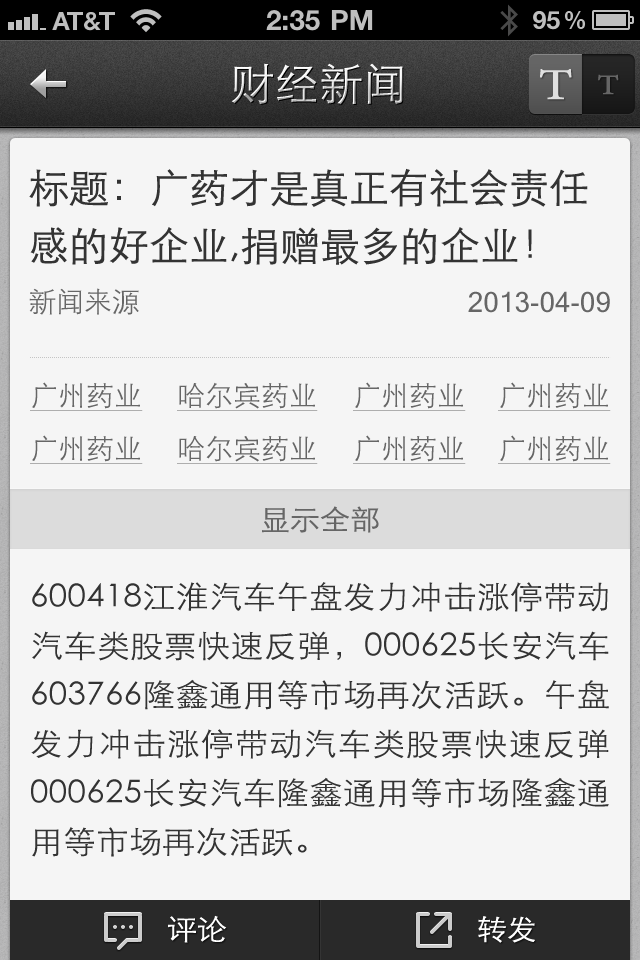
<style>
.page{position:relative;width:640px;height:960px;background:#f5f5f5}
.page>*{position:absolute;margin:0}
.t1{font:44px "STXihei";letter-spacing:0.005em}
.t2{font:44px "MinionPro-Regular";letter-spacing:0.005em;color:#dfdfdf;font-weight:bold;scale:1.25 1}
.t3{font:28px "MinionPro-Regular";letter-spacing:0.005em;color:#666666;font-weight:bold;scale:1.25 1}
.t4{font:40px/58px "STXihei";color:#333333}
.t5{font:28px "STXihei";color:#666666}
.t6{font:28px "MicrosoftSansSerif";color:#666666}
.t7{font:28px "STXihei";color:#666666;text-decoration:underline}
.t8{font:28.5px "STXihei";color:#666666;scale:1.05 1}
.t9{font:31.3px/49px "STXihei";color:#333333;scale:1.05 1}
.t10{font:28.5px "STXihei";color:#ffffff;scale:1.05 1}
</style>
<div class="page">
<p class="t1" style="left:231px;top:63px;width:172px;height:42px">财经新闻</p>
<p class="t2" style="left:540px;top:69px;width:32px;height:31px">T</p>
<p class="t3" style="left:598px;top:74px;width:21px;height:21px">T</p>
<p class="t4" style="left:29px;top:168px;width:559px;height:97px">标题：广药才是真正有社会责任<br>感的好企业,捐赠最多的企业！</p>
<p class="t5" style="left:29px;top:288px;width:110px;height:27px">新闻来源</p>
<p class="t6" style="left:468px;top:291px;width:142px;height:22px">2013-04-09</p>
<p class="t7" style="left:30px;top:382px;width:113px;height:29px">广州药业</p>
<p class="t7" style="left:177px;top:382px;width:141px;height:29px">哈尔宾药业</p>
<p class="t7" style="left:353px;top:382px;width:113px;height:29px">广州药业</p>
<p class="t7" style="left:498px;top:382px;width:113px;height:29px">广州药业</p>
<p class="t7" style="left:30px;top:435px;width:113px;height:29px">广州药业</p>
<p class="t7" style="left:177px;top:435px;width:141px;height:29px">哈尔宾药业</p>
<p class="t7" style="left:353px;top:435px;width:113px;height:29px">广州药业</p>
<p class="t7" style="left:498px;top:435px;width:113px;height:29px">广州药业</p>
<p class="t8" style="left:262px;top:506px;width:117px;height:27px">显示全部</p>
<p class="t9" style="left:31px;top:582px;width:578px;height:275px;text-align:justify">600418江淮汽车午盘发力冲击涨停带动汽车类股票快速反弹，000625长安汽车603766隆鑫通用等市场再次活跃。午盘发力冲击涨停带动汽车类股票快速反弹000625长安汽车隆鑫通用等市场隆鑫通用等市场再次活跃。</p>
<p class="t10" style="left:168px;top:915px;width:59px;height:28px">评论</p>
<p class="t10" style="left:478px;top:916px;width:57px;height:27px">转发</p>
</div>
